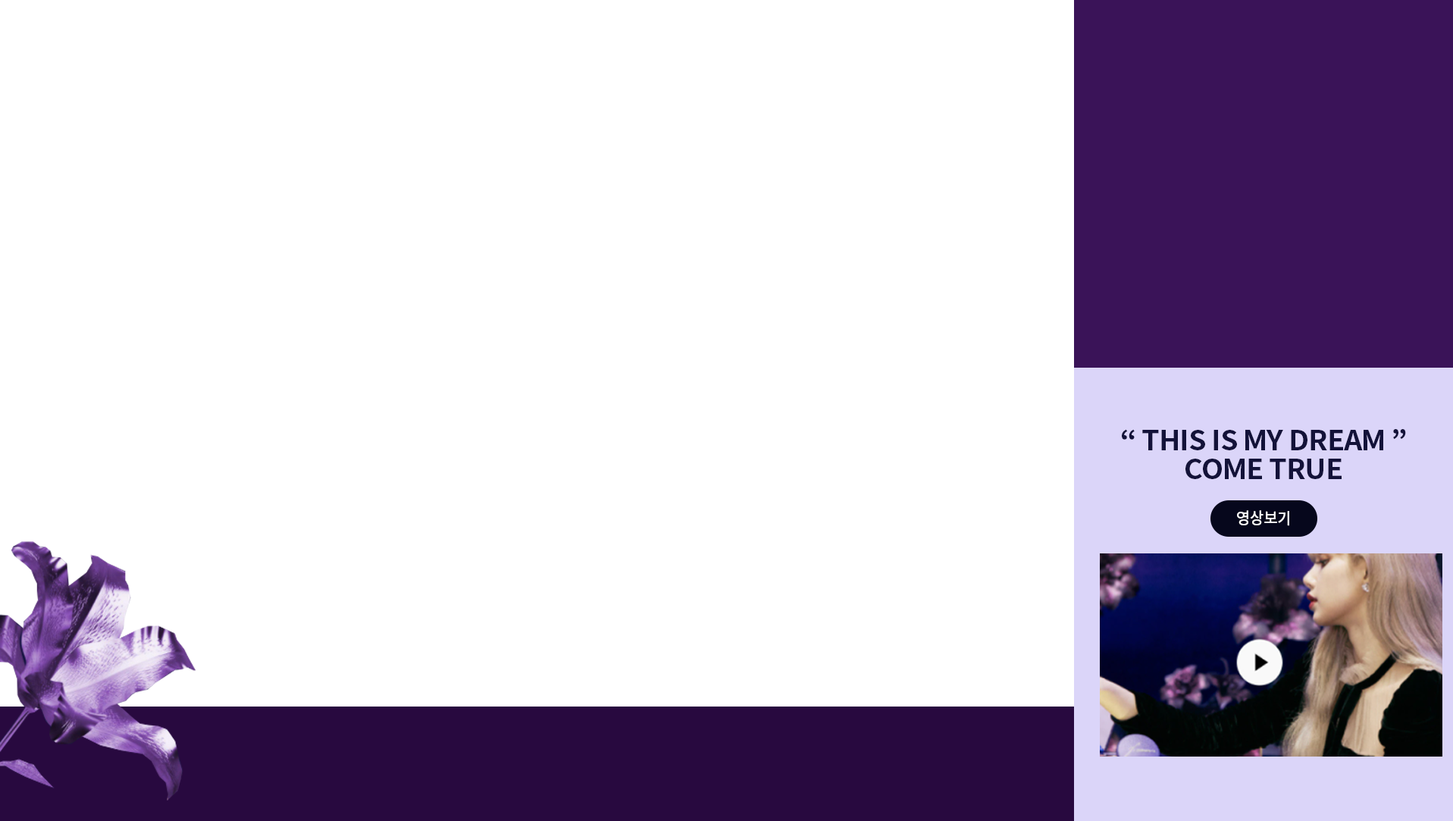
<style>
.page{position:relative;width:1453px;height:821px;background:#ffffff}
.page>*{position:absolute;margin:0}
.t1{font:27px/28.6px "NotoSansKR-Bold";letter-spacing:-0.025em;color:#131239;text-transform:uppercase;scale:1.06 1}
.t2{font:15.9px "NotoSansKR-Medium";color:#ffffff;text-transform:uppercase;scale:0.94 1}
</style>
<div class="page">
<p class="t1" style="left:1122px;top:429px;width:284px;height:50px;text-align:center">“ THIS IS MY DREAM ”<br>COME TRUE</p>
<p class="t2" style="left:1237px;top:510px;width:52px;height:16px">영상보기</p>
</div>
